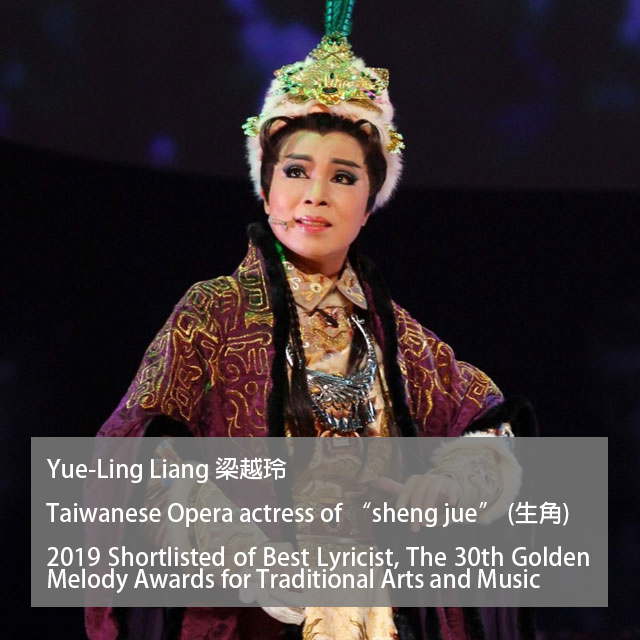
<style>
.page{position:relative;width:640px;height:640px}
.page>*{position:absolute;margin:0}
.t1{font:24px/22px "AdobeFanHeitiStd-Bold";color:#ffffff}
</style>
<div class="page">
<p class="t1" style="left:46px;top:457px;width:543px;height:137px;text-align:justify">Yue-Ling Liang 梁越玲<br><br>Taiwanese Opera actress of “sheng jue” (生角)<br><br>2019 Shortlisted of Best Lyricist, The 30th Golden Melody Awards for Traditional Arts and Music</p>
</div>
